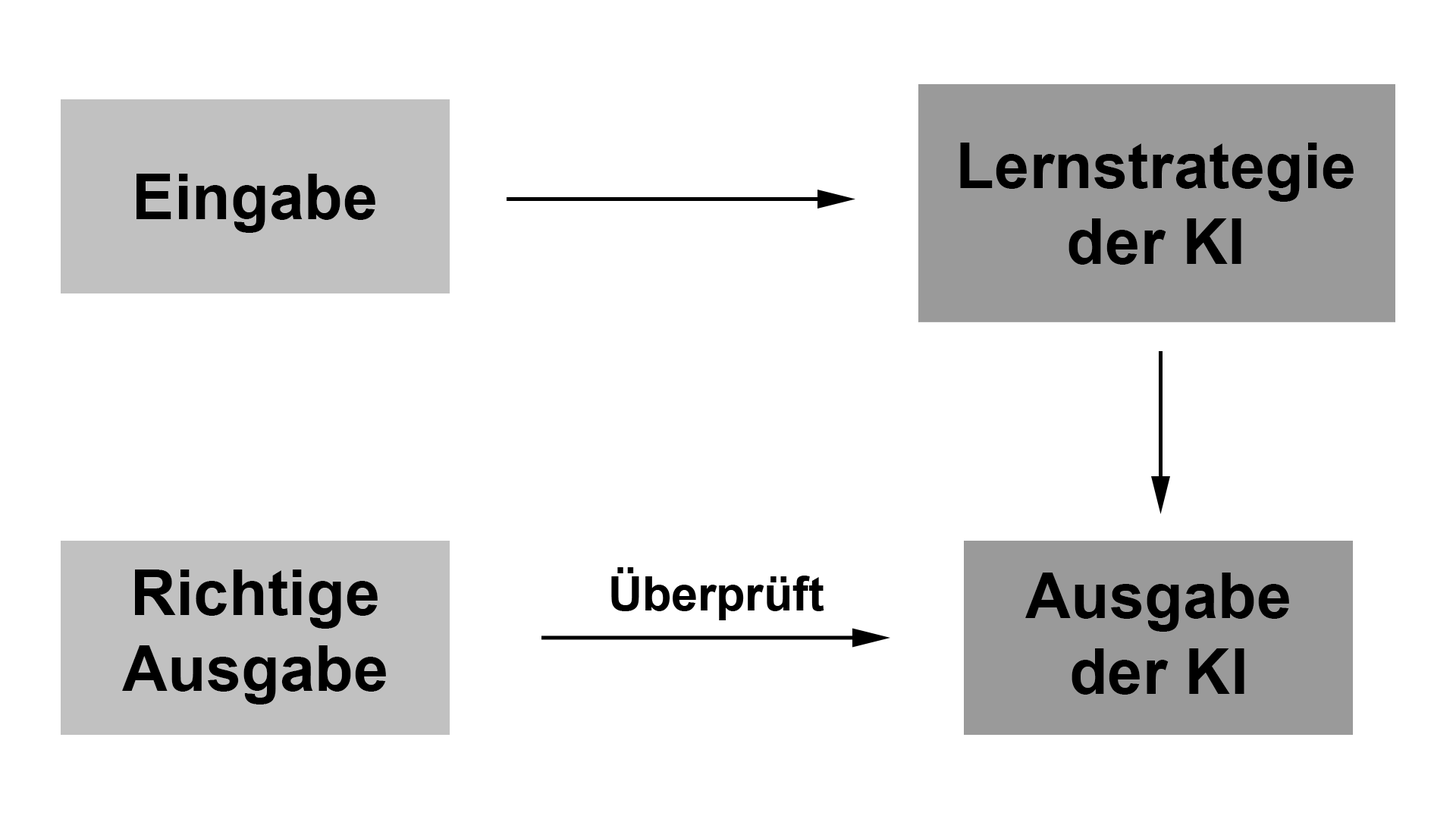
<style>
.page{position:relative;width:1456px;height:819px;background:#ffffff}
.page>*{position:absolute;margin:0}
.t1{font:63.2px "Arial-BoldMT";color:#000000}
.t2{font:47.4px "Arial-BoldMT";color:#000000}
</style>
<div class="page">
<p class="t1" style="left:960px;top:143px;width:394px;height:122px;text-align:center">Lernstrategie<br>der KI</p>
<p class="t1" style="left:136px;top:174px;width:239px;height:59px">Eingabe</p>
<p class="t1" style="left:122px;top:570px;width:264px;height:134px;text-align:center">Richtige<br>Ausgabe</p>
<p class="t2" style="left:611px;top:567px;width:213px;height:53px">Überprüft</p>
<p class="t1" style="left:1025px;top:573px;width:264px;height:122px;text-align:center">Ausgabe<br>der KI</p>
</div>
